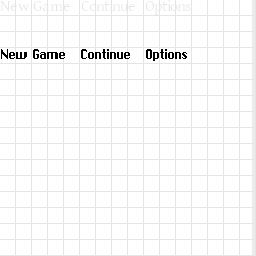
<style>
.page{position:relative;width:256px;height:256px;background:#ffffff}
.page>*{position:absolute;margin:0}
.t1{font:16.7px "RPGSystem";color:#000000}
.t2{font:16.7px "RPGSystem";letter-spacing:-0.025em;color:#000000}
</style>
<div class="page">
<p class="t1" style="left:1px;top:49px;width:186px;height:12px"><span class="t2">N</span>ew Game   Continue   Options</p>
</div>
